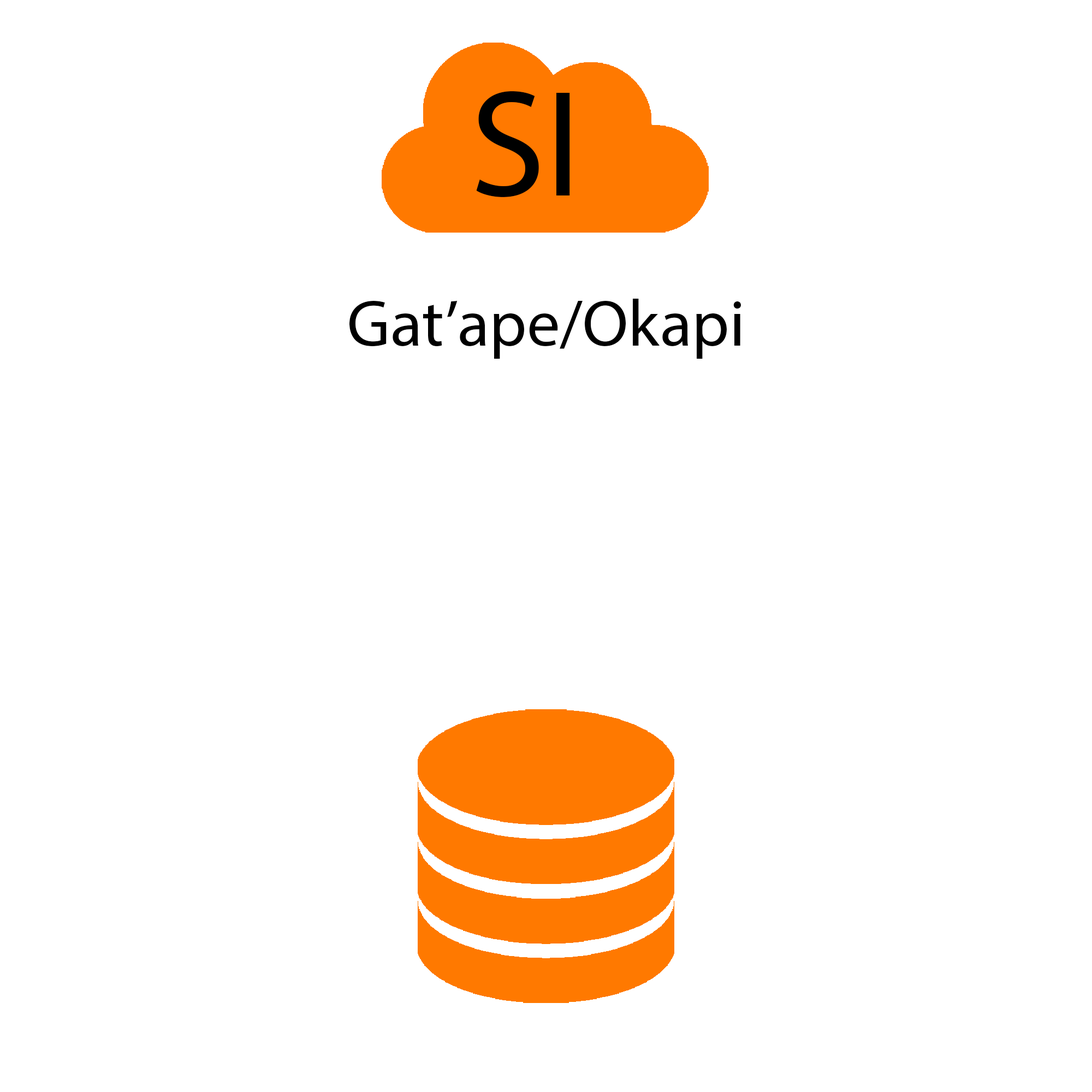
<style>
.page{position:relative;width:1092px;height:1092px;background:#ffffff}
.page>*{position:absolute;margin:0}
.t1{font:152.4px "MyriadPro-Regular";color:#000000}
.t2{font:66px "MyriadPro-Regular";color:#000000}
</style>
<div class="page">
<p class="t1" style="left:476px;top:91px;width:94px;height:106px">SI</p>
<p class="t2" style="left:349px;top:299px;width:392px;height:60px">Gat’ape/Okapi</p>
</div>
